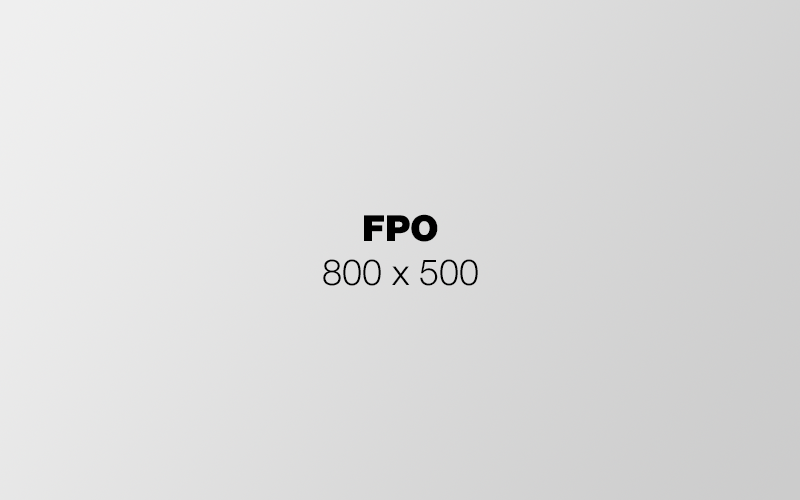
<style>
.page{position:relative;width:800px;height:500px}
.page>*{position:absolute;margin:0}
.t1{font:36px/24px "HelveticaNeueLTPro-Lt";color:#000000}
.t2{font:36px/24px "HelveticaNeueLTPro-Blk";color:#000000}
</style>
<div class="page">
<p class="t1" style="left:323px;top:214px;width:155px;height:72px;text-align:center"><span class="t2">FPO<br></span>800 x 500</p>
</div>
